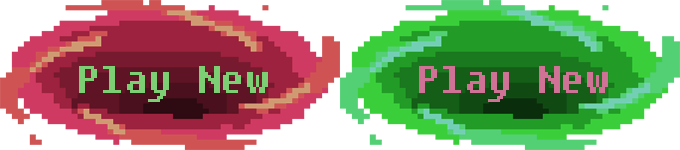
<style>
.page{position:relative;width:680px;height:150px;background:#ffffff}
.page>*{position:absolute;margin:0}
.t1{font:40px "Fixedsys";color:#7ccf72}
.t2{font:40px "Fixedsys";color:#cf7295}
</style>
<div class="page">
<p class="t1" style="left:79px;top:66px;width:189px;height:36px">Play New</p>
<p class="t2" style="left:419px;top:66px;width:189px;height:36px">Play New</p>
</div>
